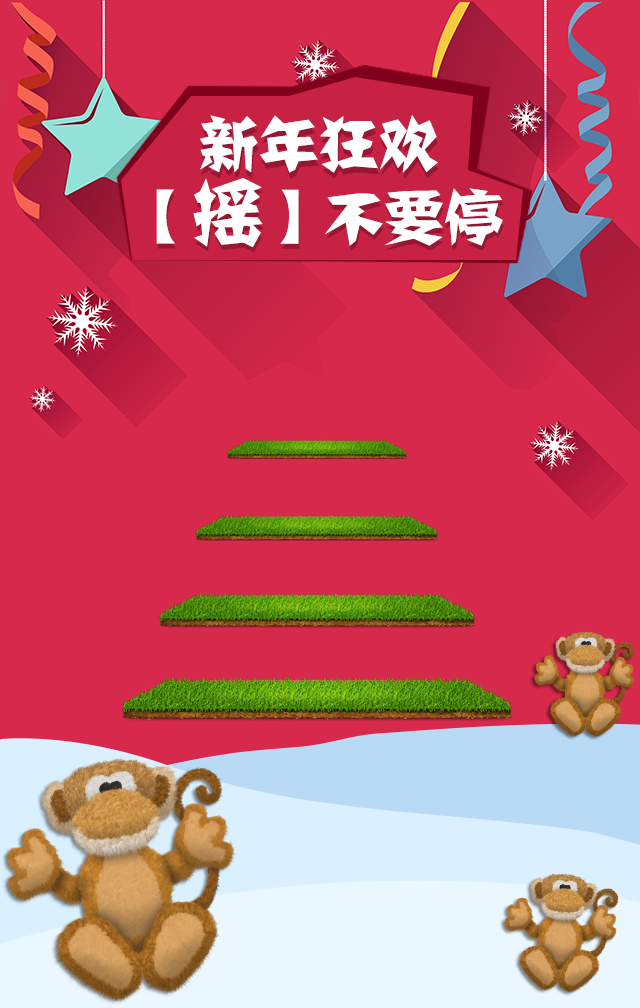
<style>
.page{position:relative;width:640px;height:1008px;background:#d7294b}
.page>*{position:absolute;margin:0}
.t1{font:60px "FZJZJW--GB1-0";color:#ffffff;text-transform:uppercase}
.t2{font:72px "FZJZJW--GB1-0";color:#ffffff;text-transform:uppercase}
.t3{font:60px "FZJZJW--GB1-0";text-transform:uppercase}
.t4{font:72px "FZJZJW--GB1-0";text-transform:uppercase}
</style>
<div class="page">
<p class="t1" style="left:200px;top:115px;width:238px;height:58px">新年狂欢</p>
<p class="t1" style="left:156px;top:178px;width:347px;height:69px">【<span class="t2">摇</span>】不要停</p>
<p class="t3" style="left:157px;top:183px;width:347px;height:69px">【<span class="t4">摇</span>】不要停</p>
</div>
